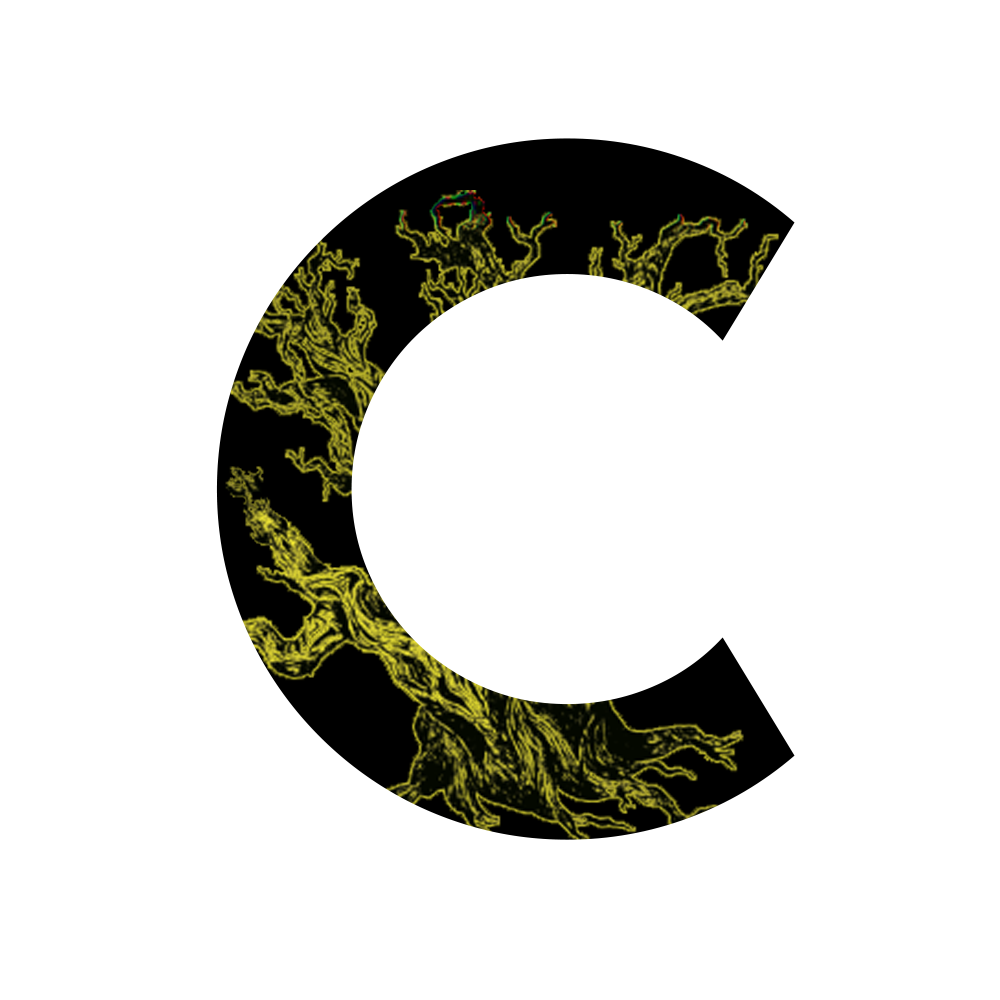
<style>
.page{position:relative;width:1000px;height:1000px;background:#ffffff}
.page>*{position:absolute;margin:0}
.t1{font:966.7px "Righteous-Regular";letter-spacing:0.06em;color:#000000}
</style>
<div class="page">
<p class="t1" style="left:216px;top:138px;width:579px;height:702px">C</p>
</div>
